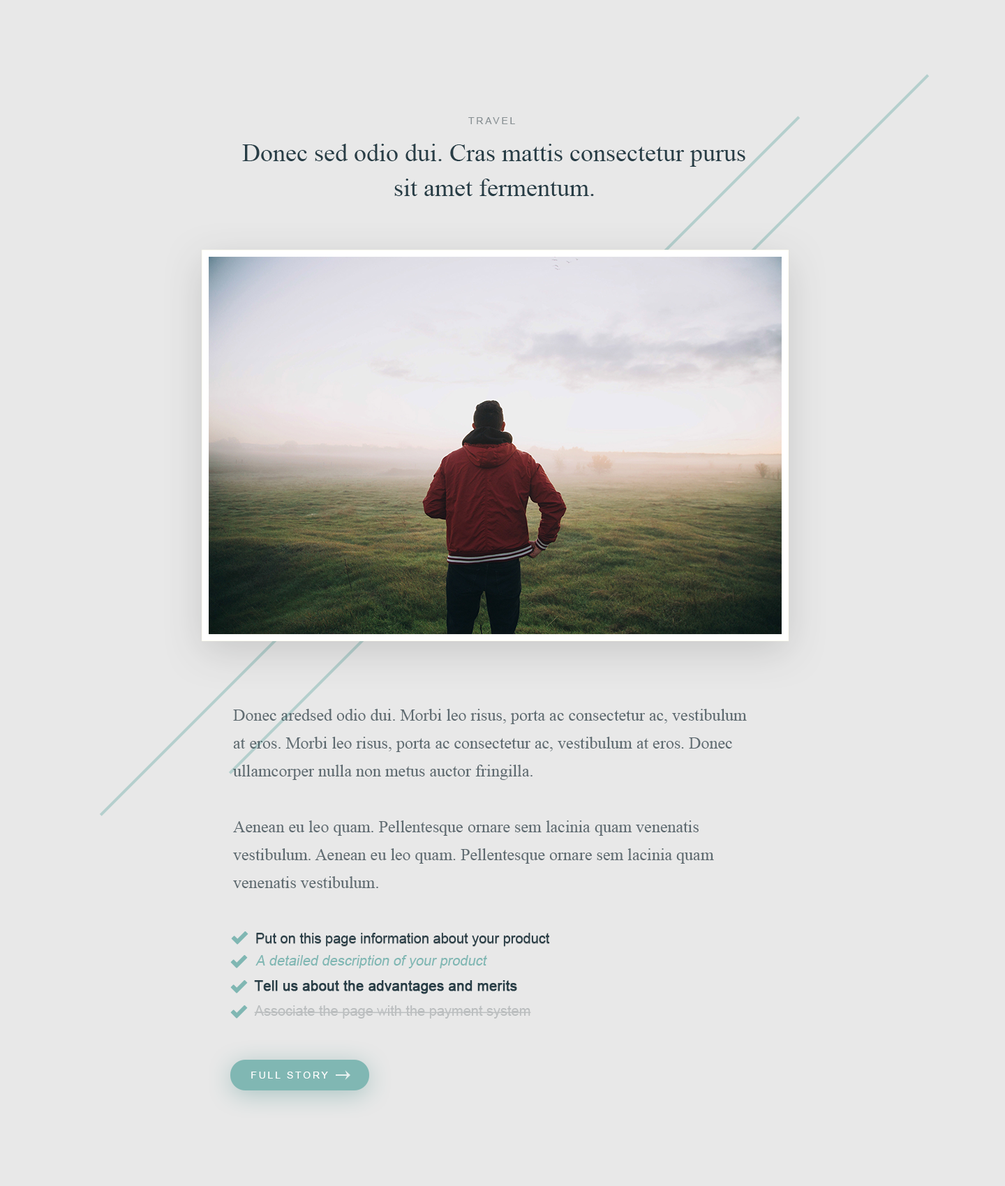
<style>
.page{position:relative;width:1005px;height:1186px;background:#e8e8e8}
.page>*{position:absolute;margin:0}
.t1{font:9.8px "ArialMT";letter-spacing:0.2em;color:#878f92;text-transform:uppercase}
.t2{font:25.1px/34.9px "TimesNewRomanPSMT";color:#273d46}
.t3{font:16.8px/27.9px "TimesNewRomanPSMT";color:#5e6a70}
.t4{font:14px "ArialMT";color:#273d46}
.t5{font:14px "ArialMT";color:#80b7b3;font-style:italic}
.t6{font:14px "ArialMT";color:#273d46;font-weight:bold}
.t7{font:14px "ArialMT";color:#bbbebf}
.t8{font:9.8px "ArialMT";letter-spacing:0.2em;color:#ffffff;text-transform:uppercase}
</style>
<div class="page">
<p class="t1" style="left:468px;top:117px;width:47px;height:7px">Travel</p>
<p class="t2" style="left:242px;top:144px;width:503px;height:52px;text-align:center">Donec sed odio dui. Cras mattis consectetur purus sit amet fermentum.</p>
<p class="t3" style="left:233px;top:709px;width:514px;height:179px">Donec aredsed odio dui. Morbi leo risus, porta ac consectetur ac, vestibulum at eros. Morbi leo risus, porta ac consectetur ac, vestibulum at eros. Donec ullamcorper nulla non metus auctor fringilla.<br><br>Aenean eu leo quam. Pellentesque ornare sem lacinia quam venenatis vestibulum. Aenean eu leo quam. Pellentesque ornare sem lacinia quam venenatis vestibulum.</p>
<p class="t4" style="left:256px;top:933px;width:294px;height:13px">Put on this page information about your product</p>
<p class="t5" style="left:255px;top:955px;width:232px;height:14px">A detailed description of your product</p>
<p class="t6" style="left:254px;top:981px;width:263px;height:14px">Tell us about the advantages and merits</p>
<p class="t7" style="left:254px;top:1006px;width:277px;height:13px">Associate the page with the payment system</p>
<p class="t8" style="left:251px;top:1072px;width:77px;height:7px">Full Story</p>
</div>
